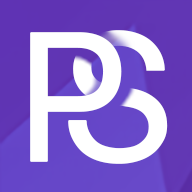
<style>
.page{position:relative;width:192px;height:192px;background:#ffffff}
.page>*{position:absolute;margin:0}
.t1{font:180px "Akkurat";color:#ffffff;font-weight:bold}
</style>
<div class="page">
<p class="t1" style="left:68px;top:30px;width:100px;height:134px">S</p>
<p class="t1" style="left:30px;top:32px;width:92px;height:130px">P</p>
</div>
